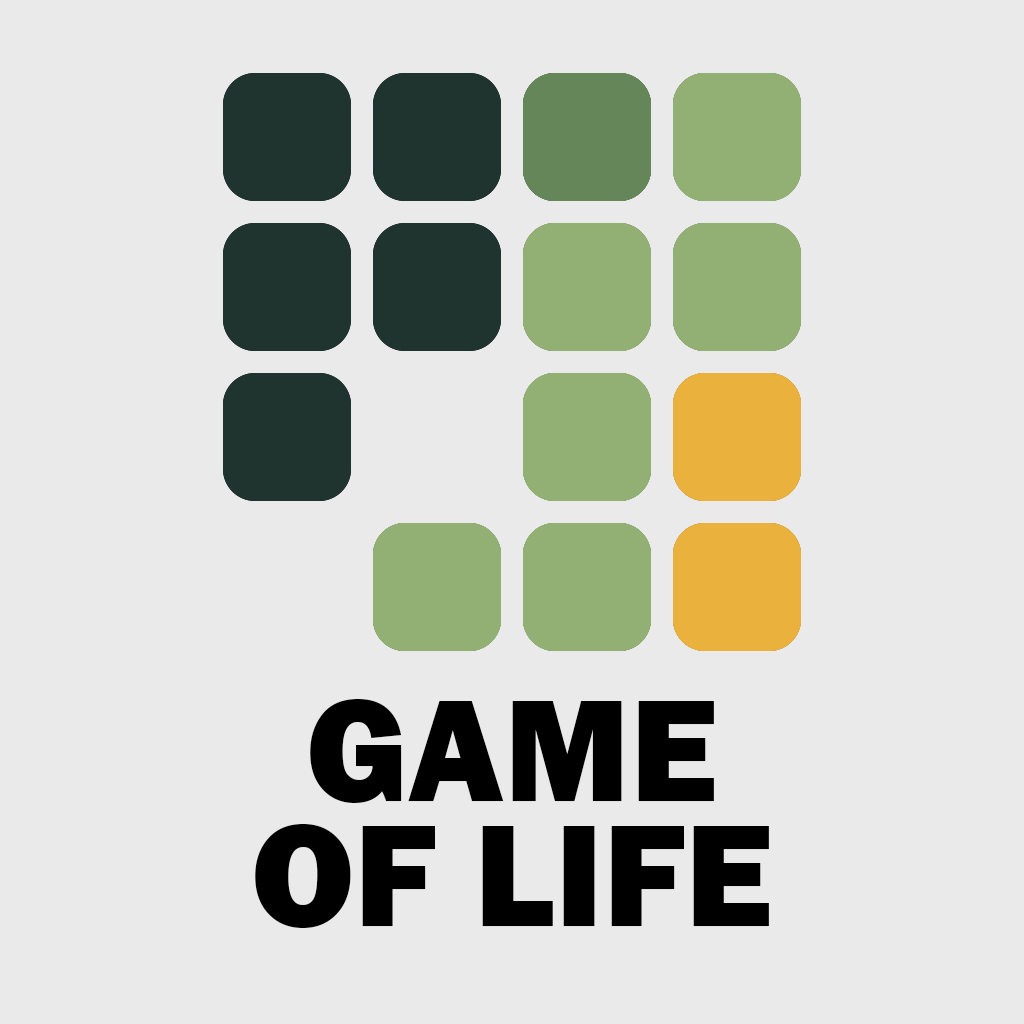
<style>
.page{position:relative;width:1024px;height:1024px;background:#eaeaea}
.page>*{position:absolute;margin:0}
.t1{font:150px/125px "FranklinGothic-Heavy";color:#000000}
</style>
<div class="page">
<p class="t1" style="left:255px;top:699px;width:514px;height:229px;text-align:center">GAME<br>OF LIFE</p>
</div>
